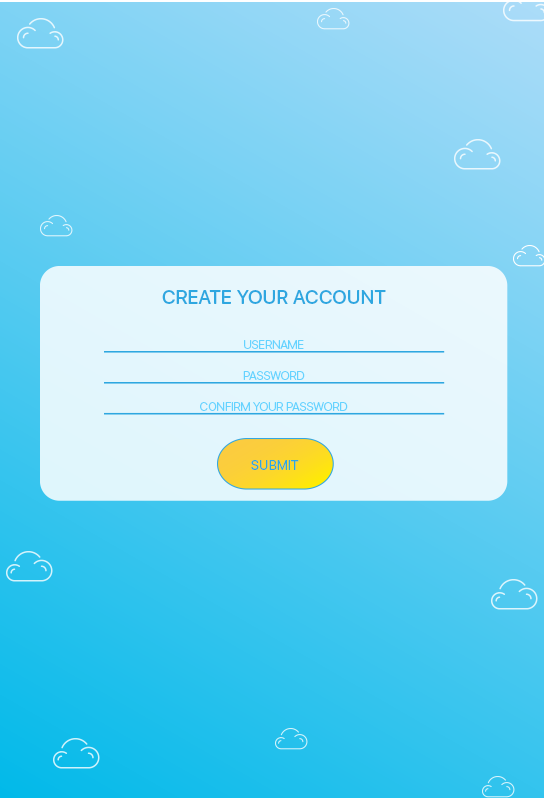
<style>
.page{position:relative;width:544px;height:798px}
.page>*{position:absolute;margin:0}
.t1{font:19.6px "SFUIDisplay-Medium";color:#2ea7e0;text-transform:uppercase}
.t2{font:12px "SFUIDisplay-Light";color:#64d3ff;text-transform:uppercase}
.t3{font:13.5px "SFUIDisplay-Regular";color:#2ea7e0;text-transform:uppercase}
</style>
<div class="page">
<p class="t1" style="left:162px;top:290px;width:224px;height:14px">Create your account</p>
<p class="t2" style="left:244px;top:340px;width:60px;height:9px">username</p>
<p class="t2" style="left:243px;top:371px;width:62px;height:9px">password</p>
<p class="t2" style="left:200px;top:402px;width:148px;height:9px">confirm your password</p>
<p class="t3" style="left:251px;top:460px;width:48px;height:10px">submit</p>
</div>
